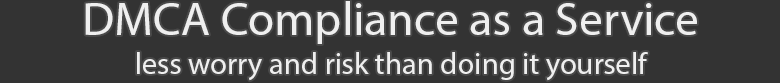
<style>
.page{position:relative;width:780px;height:83px;background:#333333}
.page>*{position:absolute;margin:0}
.t1{font:30px/39px "MyriadPro-Regular";color:#efefef}
.t2{font:47px/39px "MyriadPro-Regular";color:#efefef}
</style>
<div class="page">
<p class="t1" style="left:85px;top:1px;width:612px;height:80px;text-align:center"><span class="t2">DMCA Compliance as a Service<br></span>less worry and risk than doing it yourself</p>
</div>
